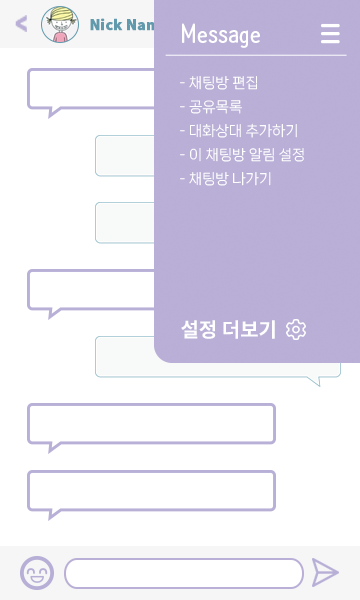
<style>
.page{position:relative;width:360px;height:600px;background:#ffffff}
.page>*{position:absolute;margin:0}
.t1{font:14px "NotoSansKR-Black";color:#619aac;font-weight:bold}
.t2{font:24px "NanumBarunpenOTF-Bold";color:#ffffff}
.t3{font:14px/24px "NanumSquareNeo-Variable";color:#ffffff}
.t4{font:20px "NotoSansKR-Bold";color:#ffffff}
</style>
<div class="page">
<p class="t1" style="left:90px;top:18px;width:79px;height:13px">Nick Name</p>
<p class="t2" style="left:182px;top:23px;width:78px;height:25px">Message</p>
<p class="t3" style="left:180px;top:76px;width:124px;height:110px">- 채팅방 편집<br>- 공유목록<br>- 대화상대 추가하기<br>- 이 채팅방 알림 설정<br>- 채팅방 나가기</p>
<p class="t4" style="left:181px;top:320px;width:94px;height:19px">설정 더보기</p>
</div>
